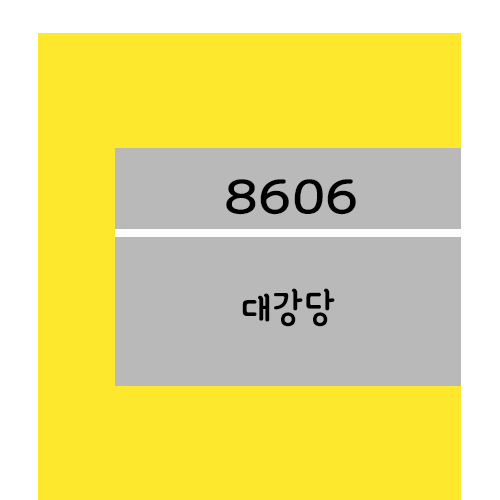
<style>
.page{position:relative;width:500px;height:500px;background:#fee82d}
.page>*{position:absolute;margin:0}
.t1{font:61.2px "YanoljaYacheR";color:#000000;scale:1.18 1}
.t2{font:48px "YanoljaYacheR";color:#000000}
</style>
<div class="page">
<p class="t1" style="left:226px;top:179px;width:130px;height:36px">8606</p>
<p class="t2" style="left:242px;top:288px;width:93px;height:39px">대강당</p>
</div>
